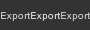
<style>
.page{position:relative;width:90px;height:30px;background:#333333}
.page>*{position:absolute;margin:0}
.t1{font:9px "HelveticaNeueLTStd-Lt";letter-spacing:0.1em;color:#c1c1c1}
.t2{font:9px "HelveticaNeueLTStd-Lt";letter-spacing:0.1em;color:#d1d1d1}
.t3{font:9px "HelveticaNeueLTStd-Lt";letter-spacing:0.1em;color:#bfbfbf}
</style>
<div class="page">
<p class="t1" style="left:1px;top:12px;width:29px;height:9px">Export</p>
<p class="t2" style="left:31px;top:12px;width:29px;height:9px">Export</p>
<p class="t3" style="left:61px;top:12px;width:29px;height:9px">Export</p>
</div>
